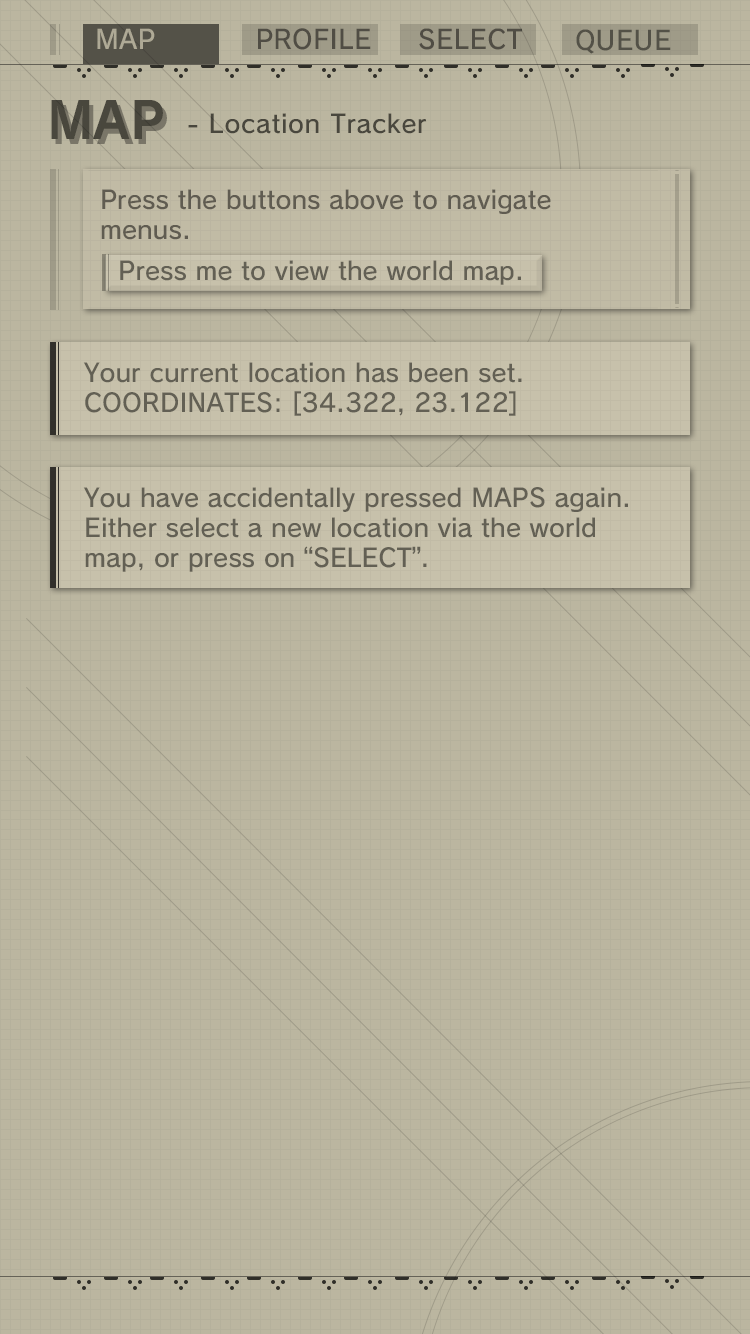
<style>
.page{position:relative;width:750px;height:1334px;background:#bbb6a0}
.page>*{position:absolute;margin:0}
.t1{font:26px "SCEPS3RodinLATIN-Regular";color:#c7c1ab}
.t2{font:26px "SCEPS3RodinLATIN-Regular";letter-spacing:0.01em;color:#504d44}
.t3{font:25.8px "SCEPS3RodinLATIN-Regular";letter-spacing:0.01em;color:#504d44}
.t4{font:25.8px "SCEPS3RodinLATIN-Regular";letter-spacing:0.01em;color:#535147}
.t5{font:50px "SCEPS3RodinLATIN-Bold";color:#49473d}
.t6{font:25px "SCEPS3RodinLATIN-Regular";letter-spacing:0.025em;color:#49473d}
.t7{font:25px "SCEPS3RodinLATIN-Regular";color:#605c51}
.t8{font:25px "SCEPS3RodinLATIN-Regular";color:#636054}
</style>
<div class="page">
<p class="t1" style="left:97px;top:28px;width:58px;height:21px">MAP</p>
<p class="t2" style="left:258px;top:28px;width:113px;height:22px">PROFILE</p>
<p class="t3" style="left:419px;top:28px;width:103px;height:22px">SELECT</p>
<p class="t4" style="left:576px;top:29px;width:95px;height:25px">QUEUE</p>
<p class="t5" style="left:51px;top:100px;width:112px;height:39px">MAP</p>
<p class="t6" style="left:188px;top:113px;width:239px;height:21px">- Location Tracker</p>
<p class="t7" style="left:101px;top:189px;width:450px;height:51px">Press the buttons above to navigate<br>menus.</p>
<p class="t8" style="left:120px;top:260px;width:401px;height:25px">Press me to view the world map.</p>
<p class="t8" style="left:83px;top:362px;width:439px;height:54px">Your current location has been set.<br>COORDINATES: [34.322, 23.122]</p>
<p class="t8" style="left:83px;top:487px;width:545px;height:85px">You have accidentally pressed MAPS again.<br>Either select a new location via the world <br>map, or press on “SELECT”.</p>
</div>
